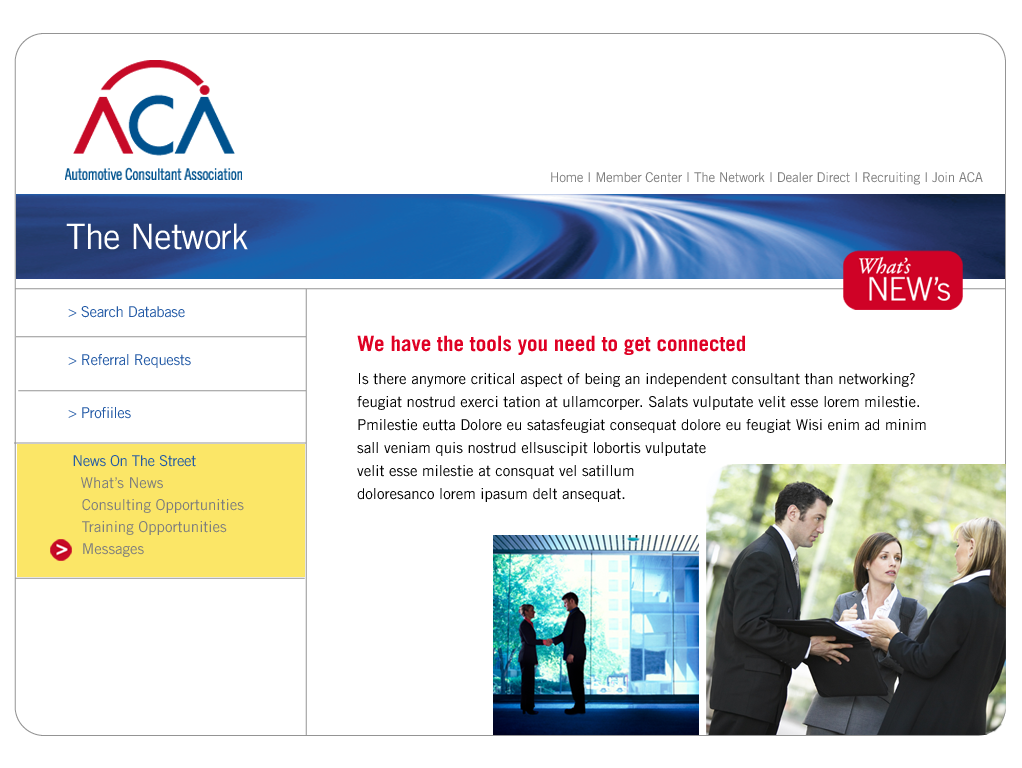
<style>
.page{position:relative;width:1022px;height:768px;background:#ffffff}
.page>*{position:absolute;margin:0}
.t1{font:13.5px "TradeGothic";letter-spacing:-0.02em;color:#7d7d7d}
.t2{font:35px "TradeGothic";letter-spacing:-0.025em;color:#ffffff}
.t3{font:15px/22px "TradeGothic";color:#7d7d7d}
.t4{font:15px/22px "TradeGothic";letter-spacing:-0.025em;color:#235aa6}
.t5{font:15px/23px "TradeGothic";color:#000000}
.t6{font:21px/19px "TradeGothic-Bold";color:#df0024}
</style>
<div class="page">
<p class="t1" style="left:551px;top:172px;width:432px;height:13px">Home I Member Center I The Network I Dealer Direct I Recruiting I Join ACA</p>
<p class="t2" style="left:66px;top:223px;width:182px;height:27px">The Network</p>
<p class="t3" style="left:68px;top:306px;width:176px;height:251px"><span class="t4">&gt; Search Database<br><br><br>&gt; Referral Requests<br><br><br>&gt; Profiiles<br><br><br> News On The Street<br>   </span>What’s News   <br>   Consulting Opportunities<br>   Training Opportunities<br>   Messages</p>
<p class="t5" style="left:357px;top:335px;width:569px;height:167px"><span class="t6">We have the tools you need to get connected<br><br></span>Is there anymore critical aspect of being an independent consultant than networking?  <br>feugiat nostrud exerci tation at ullamcorper. Salats vulputate velit esse lorem milestie. <br>Pmilestie eutta Dolore eu satasfeugiat consequat dolore eu feugiat Wisi enim ad minim <br>sall veniam quis nostrud ellsuscipit lobortis vulputate <br>velit esse milestie at consquat vel satillum <br>doloresanco lorem ipasum delt ansequat.</p>
</div>
